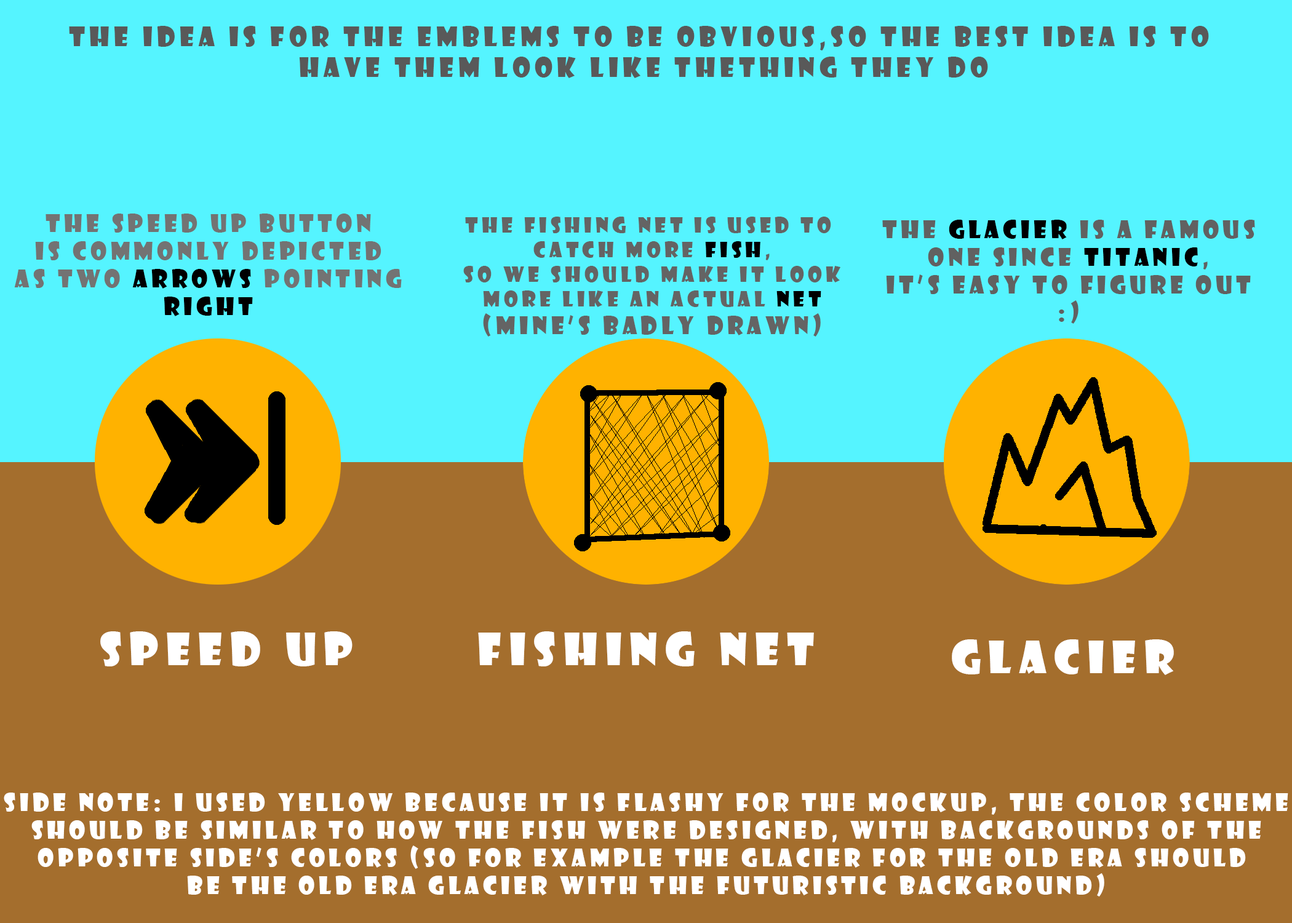
<style>
.page{position:relative;width:1292px;height:923px;background:#a46e2d}
.page>*{position:absolute;margin:0}
.t1{font:25.7px "ShowcardGothic-Reg";letter-spacing:0.18em;color:#595959}
.t2{font:23.1px "ShowcardGothic-Reg";letter-spacing:0.18em;color:#737373}
.t3{font:23.1px "ShowcardGothic-Reg";letter-spacing:0.18em;color:#000000}
.t4{font:20.5px "ShowcardGothic-Reg";letter-spacing:0.18em;color:#646464}
.t5{font:20.5px "ShowcardGothic-Reg";letter-spacing:0.18em;color:#000000}
.t6{font:23.1px "ShowcardGothic-Reg";letter-spacing:0.18em;color:#646464}
.t7{font:23.1px "ShowcardGothic-Reg";letter-spacing:0.18em;color:#616161}
.t8{font:43.6px "ShowcardGothic-Reg";letter-spacing:0.18em;color:#ffffff}
.t9{font:23.1px "ShowcardGothic-Reg";letter-spacing:0.18em;color:#ffffff}
</style>
<div class="page">
<p class="t1" style="left:69px;top:26px;width:1140px;height:52px;text-align:center">THE IDEA IS FOR THE EMBLEMS TO BE OBVIOUS,SO THE BEST IDEA IS TO <br>HAVE THEM LOOK LIKE THETHING THEY DO</p>
<p class="t2" style="left:14px;top:213px;width:388px;height:103px;text-align:center">The speed up button<br>is commonly depicted<br>as two <span class="t3">arrows</span> pointing<br><span class="t3">right</span></p>
<p class="t4" style="left:463px;top:217px;width:377px;height:120px;text-align:center">the fishing net is used to <br>catch more <span class="t5">fish</span>,<br>so we should make it look<br>more like an actual <span class="t5">net<br></span><span class="t6">(mine’s badly drawn)</span></p>
<p class="t7" style="left:882px;top:220px;width:373px;height:104px;text-align:center">The <span class="t3">glacier </span>is a famous<br>one since <span class="t3">titanic</span>,<br>it’s easy to figure out<br>:)</p>
<p class="t8" style="left:100px;top:631px;width:253px;height:35px">SPEED UP</p>
<p class="t8" style="left:478px;top:631px;width:336px;height:35px">FISHING NET</p>
<p class="t8" style="left:952px;top:639px;width:222px;height:36px">GLACIER</p>
<p class="t9" style="left:4px;top:792px;width:1284px;height:104px;text-align:center">Side note: I used yellow because it is flashy for the mockup, the color scheme<br>should be similar to how the fish were designed, with backgrounds of the<br>opposite side’s colors (so for example the glacier for the old era should <br>be the old era glacier with the futuristic background)</p>
</div>
